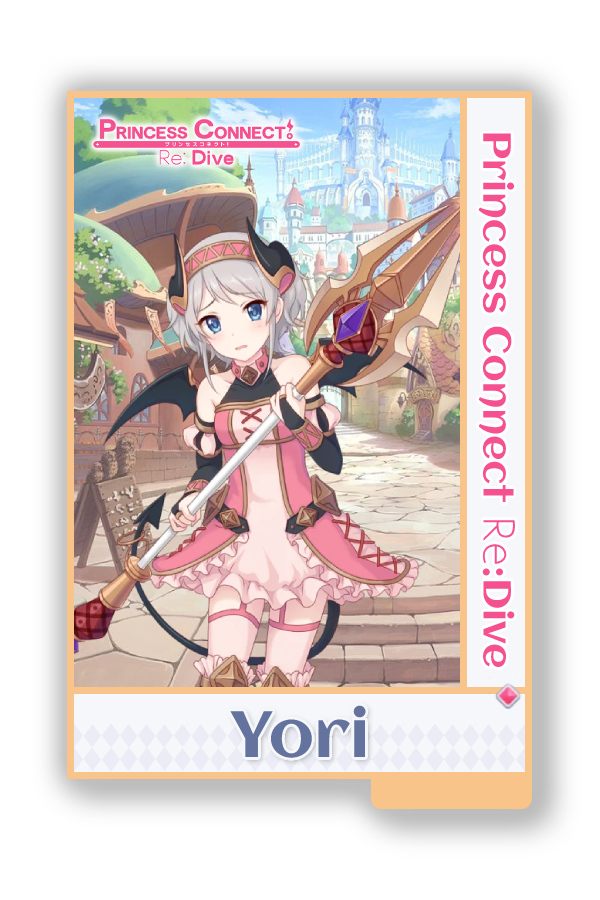
<style>
.page{position:relative;width:600px;height:900px;background:#ffffff}
.page>*{position:absolute;margin:0}
.t1{font:39px "Aclonica-Regular";color:#f55191}
.t2{font:39px "AaarghNormal";color:#f55191}
.t3{font:65px "Aclonica-Regular";color:#64739d}
</style>
<div class="page">
<p class="t1" style="left:478px;top:133px;width:38px;height:534px;rotate:90deg">Princess Connect <span class="t2">Re</span>:Dive</p>
<p class="t3" style="left:230px;top:705px;width:136px;height:53px">Yori</p>
</div>
